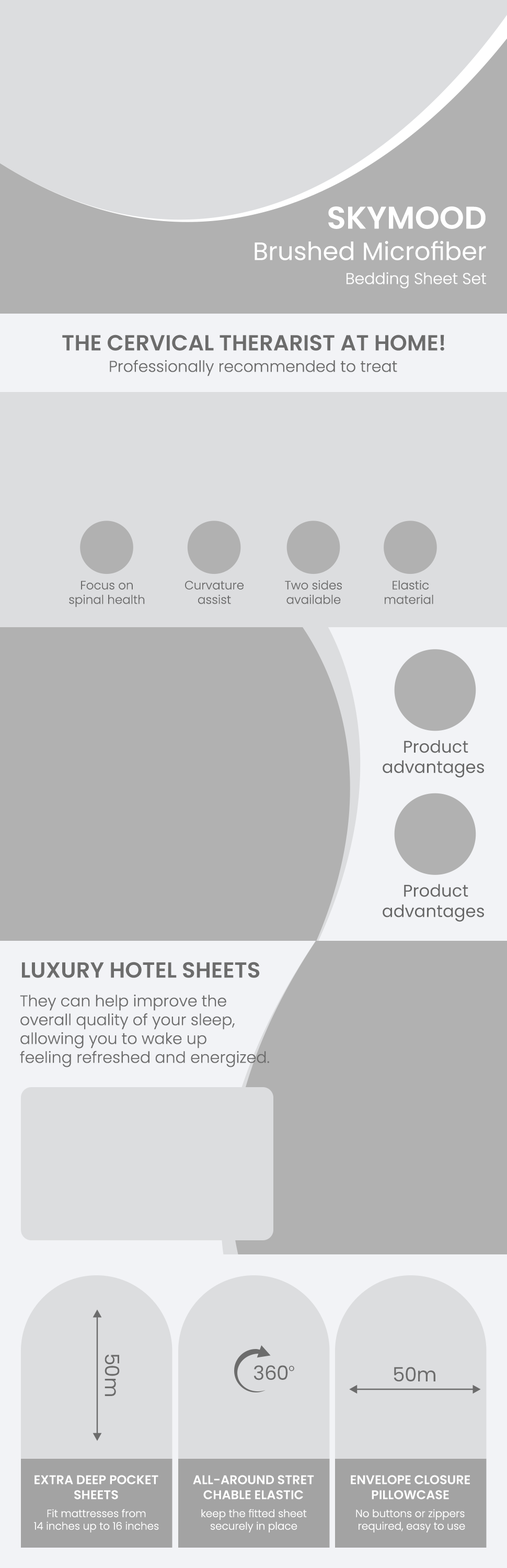
<style>
.page{position:relative;width:507px;height:1568px;background:#dcdddf}
.page>*{position:absolute;margin:0}
.t1{font:31.4px "Poppins-SemiBold";color:#ffffff;text-transform:uppercase}
.t2{font:25.1px "Poppins-Regular";color:#ffffff}
.t3{font:15.7px "Poppins-Light";color:#ffffff}
.t4{font:22px "Poppins-SemiBold";color:#6c6c6c;text-transform:uppercase}
.t5{font:15.7px "Poppins-Light";color:#6c6c6c}
.t6{font:12px "Poppins-Light";color:#6c6c6c}
.t7{font:16.9px "Poppins-Regular";color:#666666}
.t8{font:19.6px "Poppins-Regular";color:#6c6c6c}
.t9{font:9.1px "Poppins-Regular";color:#6c6c6c}
.t10{font:12.5px "Poppins-SemiBold";color:#ffffff;text-transform:uppercase}
.t11{font:10.5px "Poppins-Light";color:#ffffff}
</style>
<div class="page">
<p class="t1" style="left:328px;top:206px;width:158px;height:23px">SKYMOOD</p>
<p class="t2" style="left:255px;top:240px;width:231px;height:20px">Brushed Microfiber</p>
<p class="t3" style="left:347px;top:272px;width:139px;height:17px">Bedding Sheet Set</p>
<p class="t4" style="left:62px;top:335px;width:382px;height:16px">The cervical Therarist at Home!</p>
<p class="t5" style="left:110px;top:360px;width:287px;height:16px">Professionally recommended to treat</p>
<p class="t6" style="left:69px;top:581px;width:76px;height:26px;text-align:center">Focus on<br>spinal health</p>
<p class="t6" style="left:185px;top:581px;width:59px;height:23px;text-align:center">Curvature<br>assist</p>
<p class="t6" style="left:285px;top:580px;width:57px;height:24px;text-align:center">Two sides<br>available</p>
<p class="t6" style="left:385px;top:580px;width:48px;height:24px;text-align:center">Elastic<br>material</p>
<p class="t7" style="left:383px;top:740px;width:101px;height:38px;text-align:center">Product<br>advantages</p>
<p class="t7" style="left:383px;top:884px;width:101px;height:38px;text-align:center">Product<br>advantages</p>
<p class="t4" style="left:22px;top:962px;width:238px;height:16px">LUXURY HOTEL SHEETS</p>
<p class="t5" style="left:20px;top:994px;width:249px;height:73px">They can help improve the <br>overall quality of your sleep, <br>allowing you to wake up <br>feeling refreshed and energized.</p>
<p class="t8" style="left:105px;top:1354px;width:15px;height:42px;rotate:90deg">50m</p>
<p class="t8" style="left:253px;top:1365px;width:41px;height:15px">360<span class="t9">o</span></p>
<p class="t8" style="left:394px;top:1367px;width:41px;height:14px">50m</p>
<p class="t10" style="left:34px;top:1475px;width:124px;height:25px;text-align:center">EXTRA DEEP POCKET<br>SHEETS</p>
<p class="t10" style="left:193px;top:1475px;width:121px;height:25px;text-align:center">ALL-AROUND STRET<br>CHABLE ELASTIC</p>
<p class="t10" style="left:351px;top:1475px;width:119px;height:25px;text-align:center">ENVELOPE CLOSURE<br>PILLOWCASE</p>
<p class="t11" style="left:34px;top:1509px;width:125px;height:23px;text-align:center">Fit mattresses from<br>14 inches up to 16 inches</p>
<p class="t11" style="left:201px;top:1509px;width:106px;height:23px;text-align:center">keep the fitted sheet<br>securely in place</p>
<p class="t11" style="left:356px;top:1509px;width:109px;height:23px;text-align:center">No buttons or zippers <br>required, easy to use</p>
</div>
